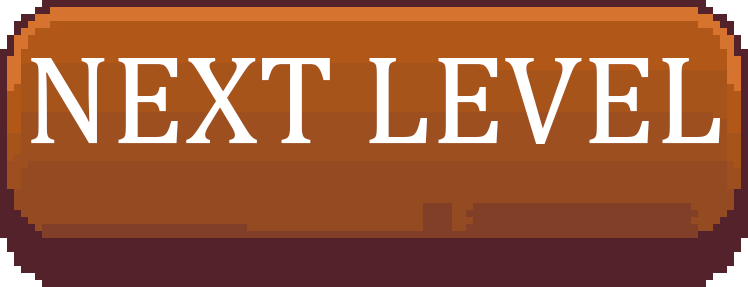
<style>
.page{position:relative;width:748px;height:287px;background:#54222a}
.page>*{position:absolute;margin:0}
.t1{font:128px "Cambria";color:#ffffff}
</style>
<div class="page">
<p class="t1" style="left:31px;top:58px;width:689px;height:86px">NEXT LEVEL</p>
</div>
